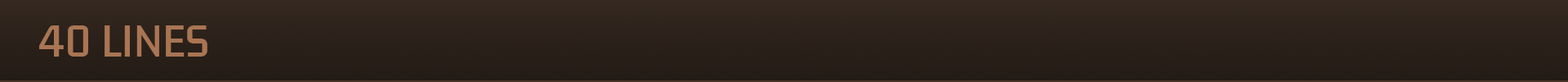
<style>
.page{position:relative;width:1568px;height:82px}
.page>*{position:absolute;margin:0}
.t1{font:39.2px "KdamThmorPro-Regular";color:#a97553}
</style>
<div class="page">
<p class="t1" style="left:39px;top:25px;width:168px;height:31px">40 LINES</p>
</div>
